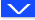
<style>
.page{position:relative;width:35px;height:20px;background:#154cfe}
.page>*{position:absolute;margin:0}
.t1{font:13.8px "ArialMT";color:#ffffff;scale:2.64 1}
</style>
<div class="page">
<p class="t1" style="left:7px;top:4px;width:24px;height:10px">V</p>
</div>
